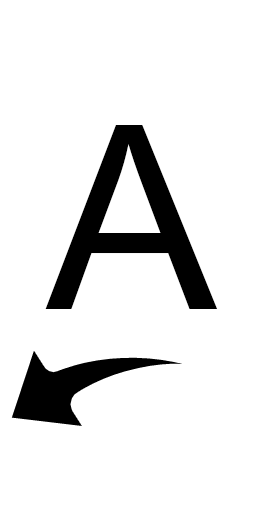
<style>
.page{position:relative;width:256px;height:512px;background:#ffffff}
.page>*{position:absolute;margin:0}
.t1{font:256px "ArialMT";color:#000000}
</style>
<div class="page">
<p class="t1" style="left:45px;top:125px;width:173px;height:184px">A</p>
</div>
